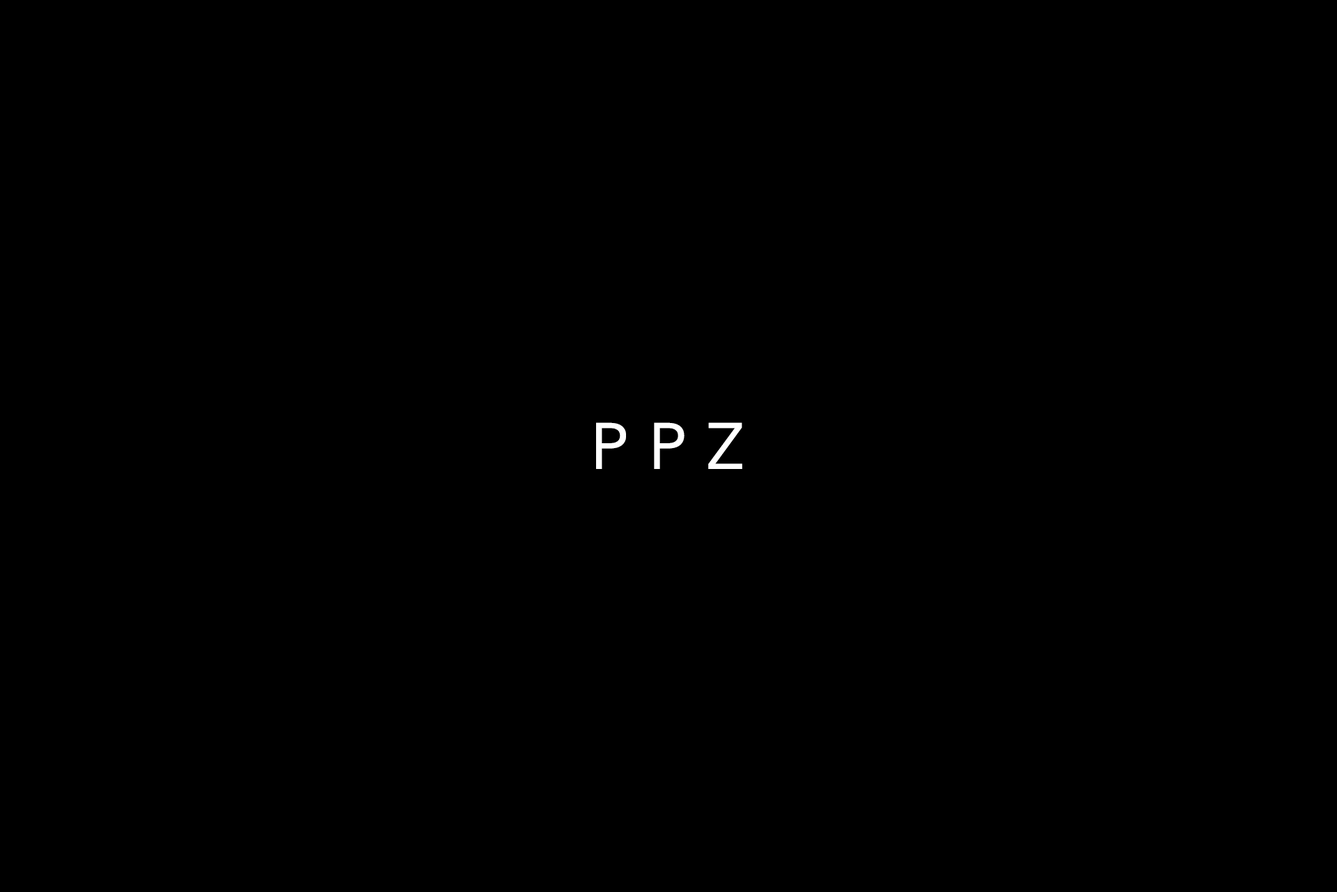
<style>
.page{position:relative;width:1337px;height:892px;background:#000000}
.page>*{position:absolute;margin:0}
.t1{font:65px "Avenir-Roman";letter-spacing:0.3em;color:#ffffff;text-transform:uppercase}
</style>
<div class="page">
<p class="t1" style="left:596px;top:422px;width:147px;height:47px">PPZ</p>
</div>
